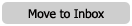
<style>
.page{position:relative;width:132px;height:26px;background:#cecece}
.page>*{position:absolute;margin:0}
.t1{font:12px "Tahoma";color:#030101}
</style>
<div class="page">
<p class="t1" style="left:28px;top:8px;width:76px;height:11px">Move to Inbox</p>
</div>
